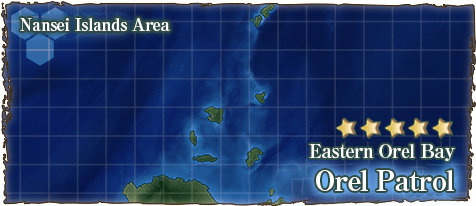
<style>
.page{position:relative;width:476px;height:206px}
.page>*{position:absolute;margin:0}
.t1{font:17px "RyuminPro-ExBold";letter-spacing:-0.04em;color:#ffffff}
.t2{font:19px "RyuminPro-ExBold";letter-spacing:-0.04em;color:#ffffff}
.t3{font:28px "RyuminPro-ExBold";letter-spacing:-0.04em;color:#ffffff}
</style>
<div class="page">
<p class="t1" style="left:20px;top:18px;width:150px;height:14px">Nansei Islands Area</p>
<p class="t2" style="left:309px;top:144px;width:146px;height:17px">Eastern Orel Bay</p>
<p class="t3" style="left:316px;top:170px;width:138px;height:21px">Orel Patrol</p>
</div>
